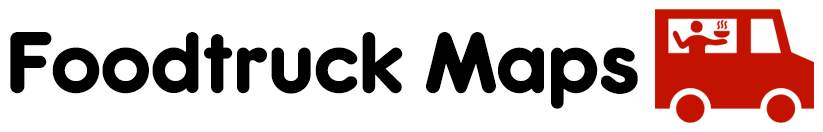
<style>
.page{position:relative;width:823px;height:132px;background:#ffffff}
.page>*{position:absolute;margin:0}
.t1{font:81.5px "RockoUltraFLF";color:#000000}
</style>
<div class="page">
<p class="t1" style="left:10px;top:32px;width:628px;height:77px">Foodtruck Maps</p>
</div>
